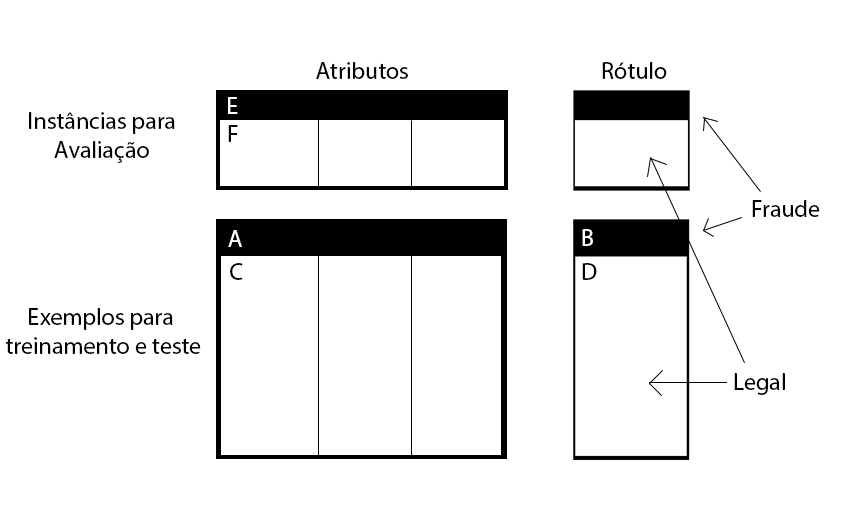
<style>
.page{position:relative;width:857px;height:511px;background:#ffffff}
.page>*{position:absolute;margin:0}
.t1{font:24px "MyriadPro-Regular";color:#000000}
.t2{font:24px "MyriadPro-Regular";color:#ffffff}
</style>
<div class="page">
<p class="t1" style="left:316px;top:62px;width:92px;height:17px">Atributos</p>
<p class="t1" style="left:602px;top:62px;width:65px;height:17px">Rótulo</p>
<p class="t2" style="left:228px;top:97px;width:10px;height:17px">E</p>
<p class="t1" style="left:29px;top:112px;width:146px;height:51px;text-align:center">Instâncias para<br>Avaliação</p>
<p class="t1" style="left:228px;top:125px;width:10px;height:17px">F</p>
<p class="t1" style="left:752px;top:200px;width:68px;height:17px">Fraude</p>
<p class="t2" style="left:228px;top:230px;width:14px;height:17px">A</p>
<p class="t2" style="left:582px;top:229px;width:11px;height:17px">B</p>
<p class="t1" style="left:230px;top:263px;width:13px;height:17px">C</p>
<p class="t1" style="left:582px;top:263px;width:15px;height:17px">D</p>
<p class="t1" style="left:5px;top:308px;width:196px;height:46px;text-align:center">Exemplos para <br>treinamento e teste</p>
<p class="t1" style="left:734px;top:373px;width:51px;height:22px">Legal</p>
</div>
